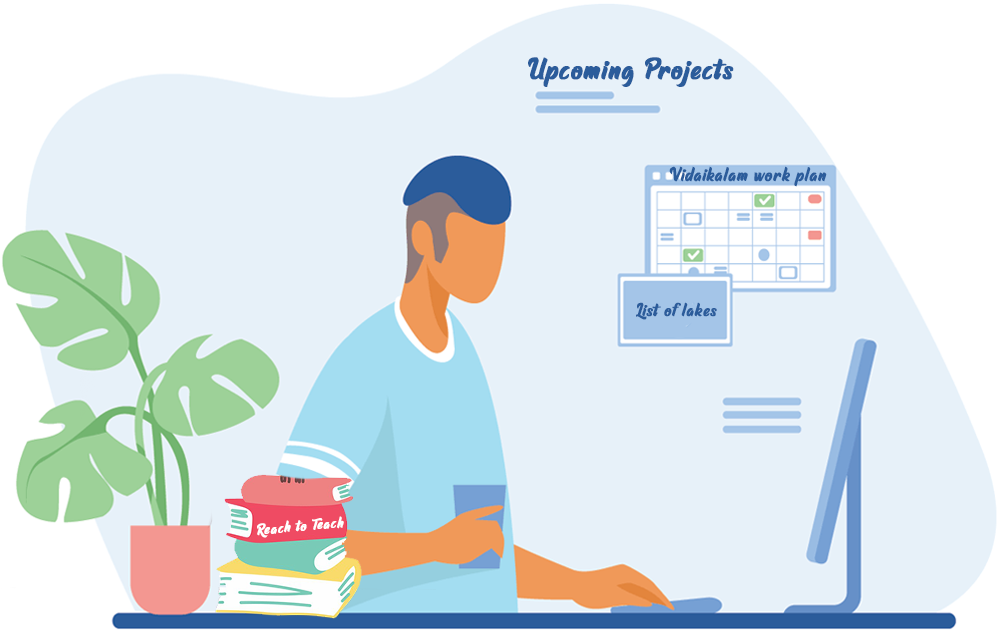
<style>
.page{position:relative;width:999px;height:641px;background:#e7f1f9}
.page>*{position:absolute;margin:0}
.t1{font:30.9px "RaphtaliaPersonalUseOnly";letter-spacing:0.02em;color:#2b5c9b;font-weight:bold}
.t2{font:20px "RaphtaliaPersonalUseOnly";letter-spacing:0.02em;color:#2b5c9b;font-weight:bold}
.t3{font:19px "RaphtaliaPersonalUseOnly";letter-spacing:0.02em;color:#2b5c9b;font-weight:bold}
.t4{font:16px "RaphtaliaPersonalUseOnly";letter-spacing:0.02em;color:#ffffff;font-weight:bold}
</style>
<div class="page">
<p class="t1" style="left:528px;top:57px;width:206px;height:30px">Upcoming Projects</p>
<p class="t2" style="left:669px;top:166px;width:158px;height:21px">Vidaikalam work plan</p>
<p class="t3" style="left:636px;top:302px;width:81px;height:18px">List of lakes</p>
<p class="t4" style="left:257px;top:516px;width:87px;height:22px;rotate:-5deg">Reach to Teach</p>
</div>
